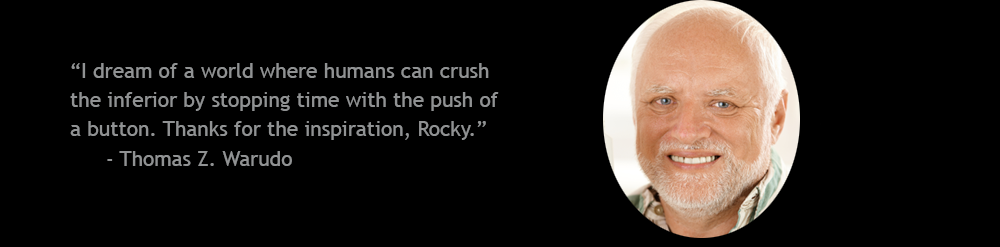
<style>
.page{position:relative;width:1000px;height:247px;background:#000000}
.page>*{position:absolute;margin:0}
.t1{font:20.8px/29.2px "TrebuchetMS";color:#909293}
</style>
<div class="page">
<p class="t1" style="left:70px;top:63px;width:429px;height:103px">“I dream of a world where humans can crush <br>the inferior by stopping time with the push of <br>a button. Thanks for the inspiration, Rocky.”<br> - Thomas Z. Warudo</p>
</div>
